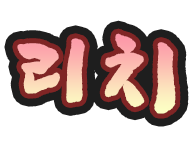
<style>
.page{position:relative;width:193px;height:143px;background:#ffffff}
.page>*{position:absolute;margin:0}
.t1{font:95px "SangSangRockOTF";letter-spacing:0.24em}
</style>
<div class="page">
<p class="t1" style="left:19px;top:35px;width:155px;height:77px;rotate:3deg">리치</p>
</div>
